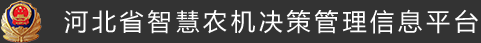
<style>
.page{position:relative;width:481px;height:43px;background:#333333}
.page>*{position:absolute;margin:0}
.t1{font:24px "MicrosoftYaHei";letter-spacing:0.16em;color:#ffffff}
</style>
<div class="page">
<p class="t1" style="left:64px;top:9px;width:414px;height:25px">河北省智慧农机决策管理信息平台</p>
</div>
